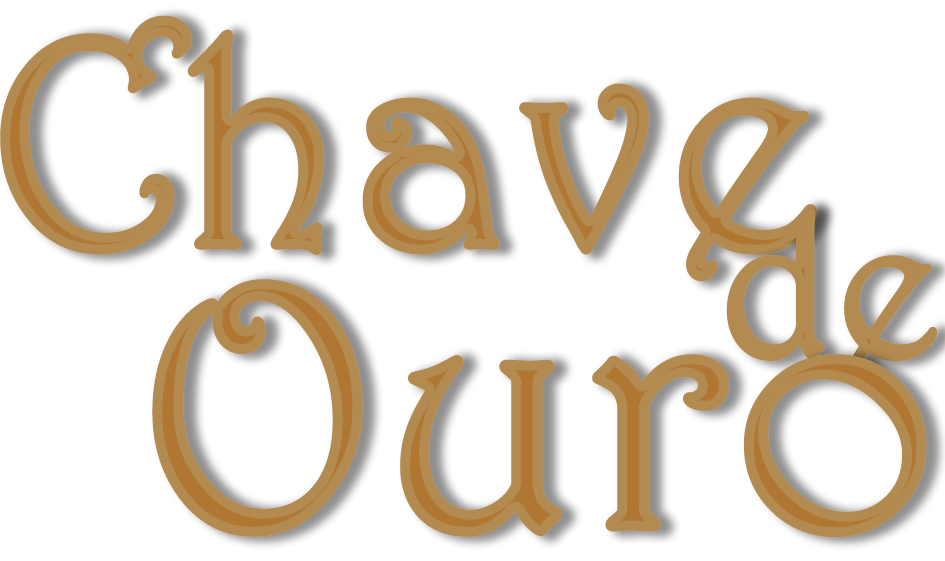
<style>
.page{position:relative;width:945px;height:561px;background:#ffffff}
.page>*{position:absolute;margin:0}
.t1{font:298.3px "Harrington";color:#b38b50;font-weight:bold}
.t2{font:201px "Harrington";color:#b38b50;font-weight:bold}
.t3{font:347.7px "Harrington";color:#b38b50;font-weight:bold}
</style>
<div class="page">
<p class="t1" style="left:0px;top:15px;width:817px;height:267px">Chave</p>
<p class="t2" style="left:726px;top:209px;width:212px;height:170px">de</p>
<p class="t3" style="left:152px;top:279px;width:775px;height:258px">Ouro</p>
</div>
